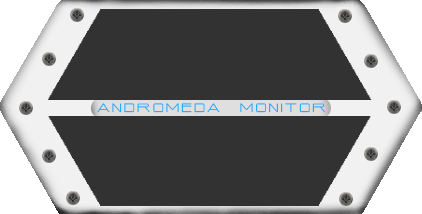
<style>
.page{position:relative;width:422px;height:214px;background:#323232}
.page>*{position:absolute;margin:0}
.t1{font:12px "TimeNSpace";color:#02a9ff}
</style>
<div class="page">
<p class="t1" style="left:97px;top:103px;width:228px;height:10px">a n d r o m e d a       m o n i t o r</p>
</div>
